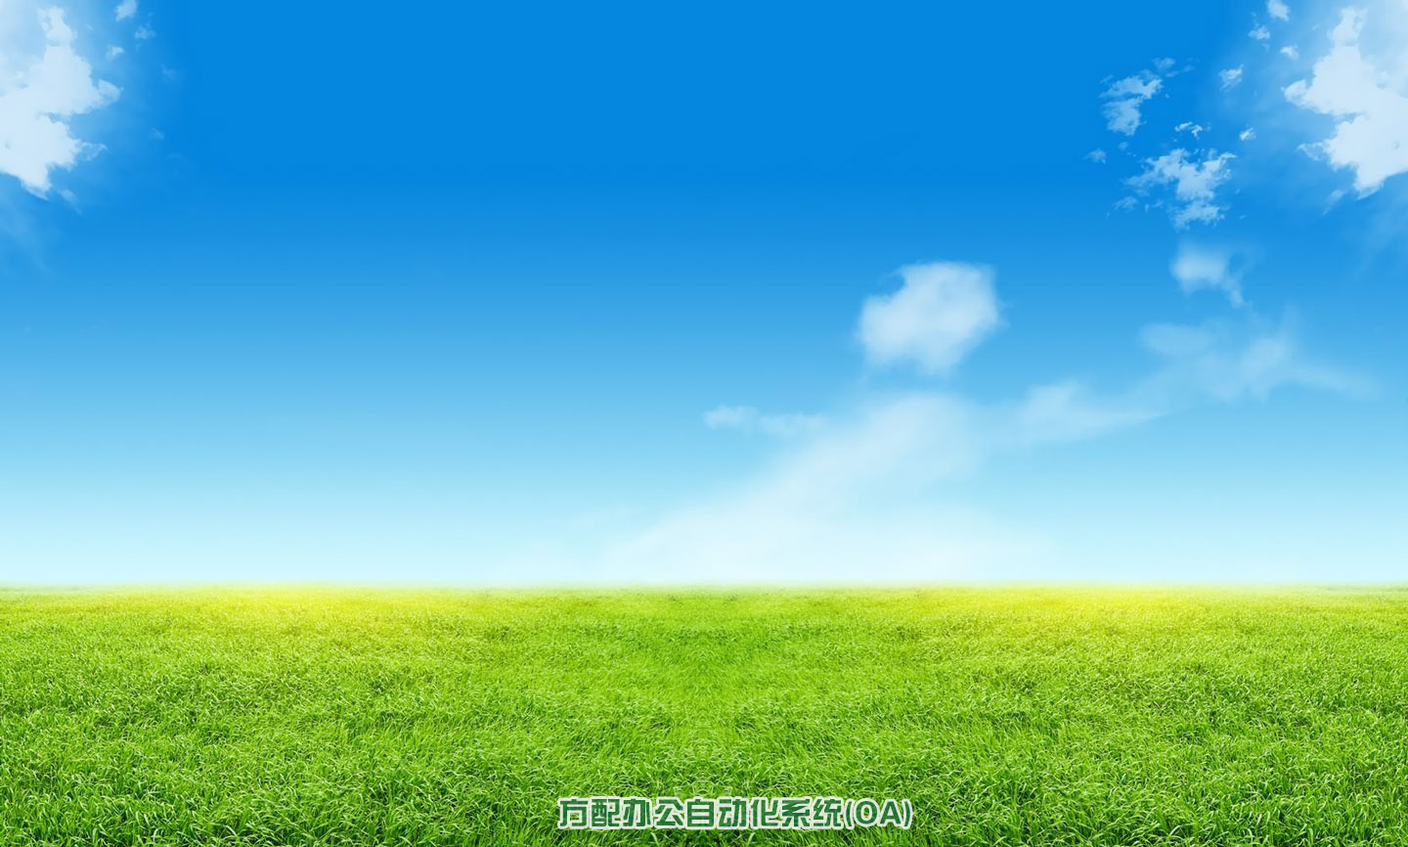
<style>
.page{position:relative;width:1408px;height:847px}
.page>*{position:absolute;margin:0}
.t1{font:30.9px "FZZYJW--GB1-0";letter-spacing:0.025em;color:#297934}
</style>
<div class="page">
<p class="t1" style="left:560px;top:798px;width:350px;height:29px">方配办公自动化系统(OA)</p>
</div>
